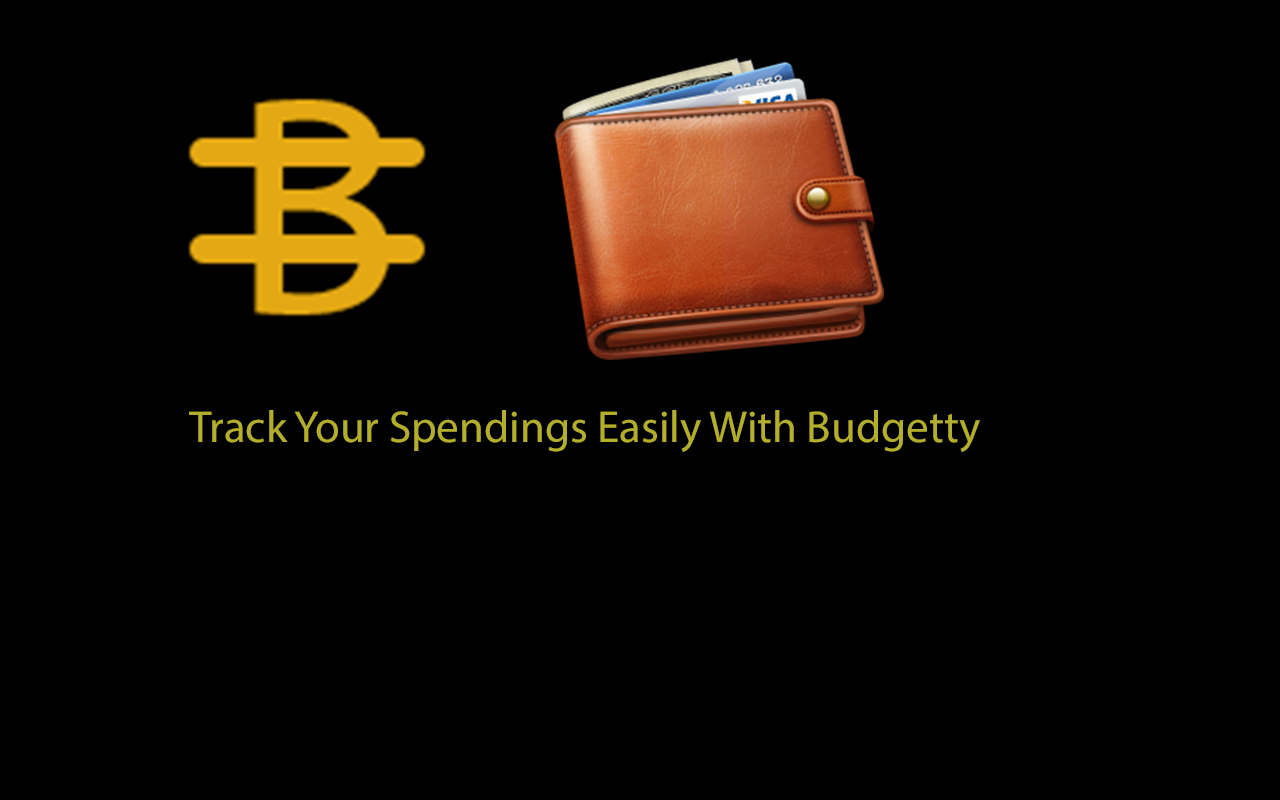
<style>
.page{position:relative;width:1280px;height:800px;background:#000000}
.page>*{position:absolute;margin:0}
.t1{font:45px "MyriadPro-Regular";color:#b3ae2b}
</style>
<div class="page">
<p class="t1" style="left:189px;top:410px;width:791px;height:42px">Track Your Spendings Easily With Budgetty</p>
</div>
